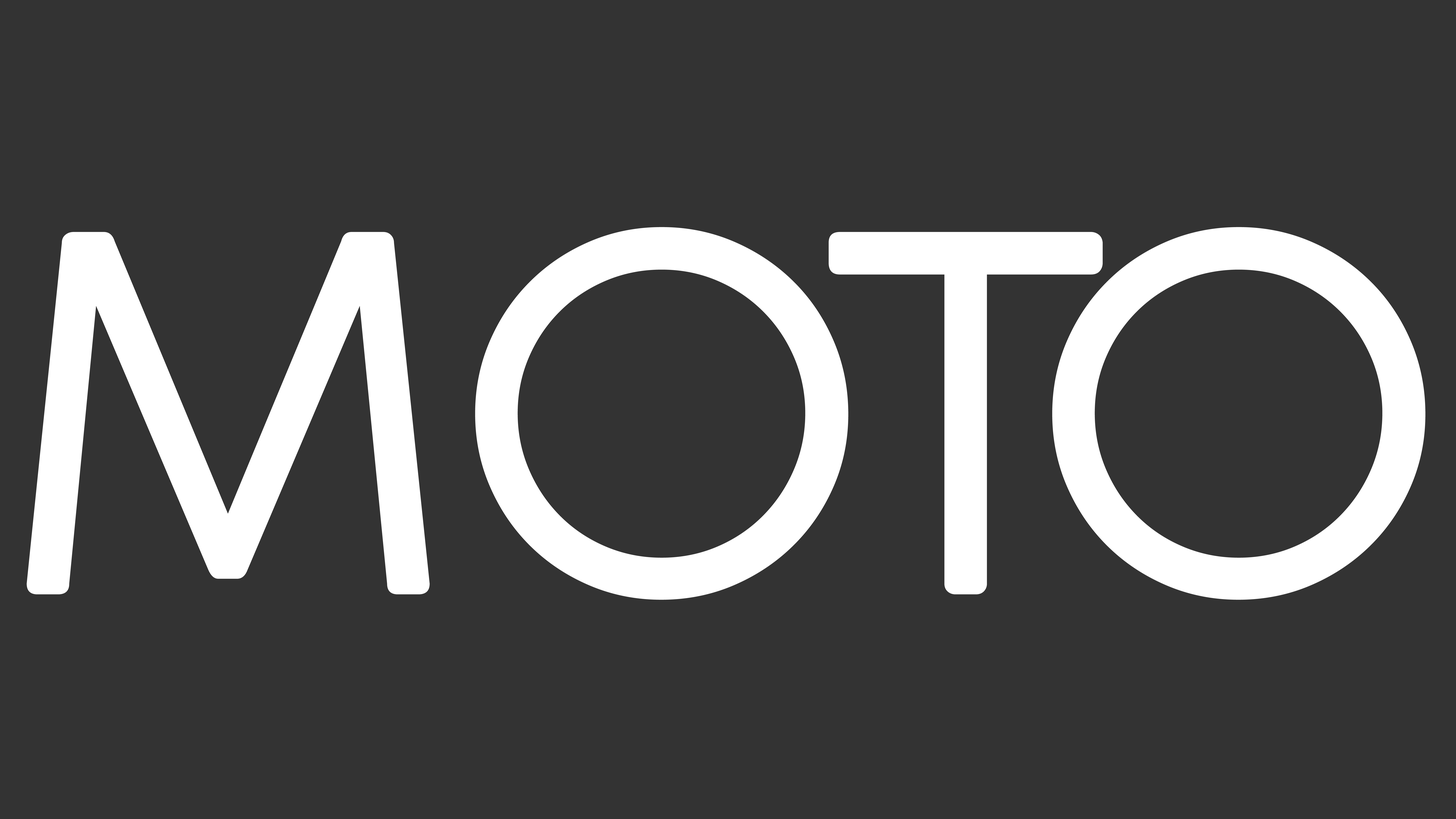
<style>
.page{position:relative;width:1456px;height:819px;background:#333333}
.page>*{position:absolute;margin:0}
.t1{font:488.3px "CocoGothic";color:#ffffff}
</style>
<div class="page">
<p class="t1" style="left:27px;top:227px;width:1398px;height:373px">MOTO</p>
</div>
